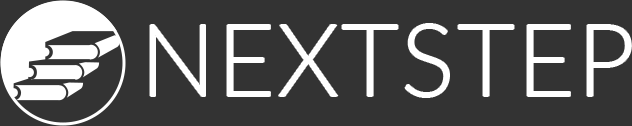
<style>
.page{position:relative;width:632px;height:126px;background:#333333}
.page>*{position:absolute;margin:0}
.t1{font:100px "Lato-Light";letter-spacing:0.02em;color:#ffffff}
</style>
<div class="page">
<p class="t1" style="left:150px;top:24px;width:481px;height:73px">NEXTSTEP</p>
</div>
